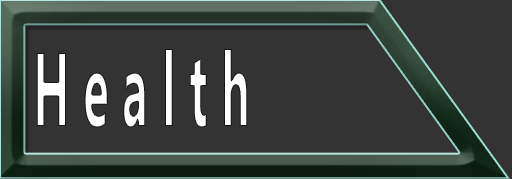
<style>
.page{position:relative;width:512px;height:179px;background:#333333}
.page>*{position:absolute;margin:0}
.t1{font:103.9px "SegoeWP-Bold";letter-spacing:0.28em;color:#ffffff;scale:0.46 1}
</style>
<div class="page">
<p class="t1" style="left:36px;top:49px;width:212px;height:79px">Health</p>
</div>
